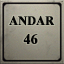
<style>
.page{position:relative;width:64px;height:64px}
.page>*{position:absolute;margin:0}
.t1{font:12.7px "TimesNewRomanPS-BoldMT";letter-spacing:0.005em;color:#040404;text-transform:uppercase;font-weight:bold;scale:0.95 1}
.t2{font:14.3px "TimesNewRomanPS-BoldMT";letter-spacing:0.005em;color:#040404;text-transform:uppercase;font-weight:bold;scale:0.97 1}
</style>
<div class="page">
<p class="t1" style="left:9px;top:16px;width:46px;height:10px">andar</p>
<p class="t2" style="left:23px;top:34px;width:15px;height:10px">46</p>
</div>
